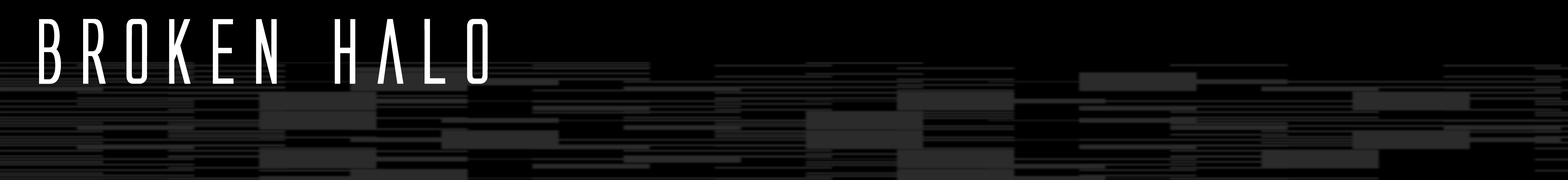
<style>
.page{position:relative;width:1568px;height:180px;background:#000000}
.page>*{position:absolute;margin:0}
.t1{font:83.4px "AlienLeague";letter-spacing:0.035em;color:#ffffff;font-weight:bold}
</style>
<div class="page">
<p class="t1" style="left:39px;top:18px;width:449px;height:66px">broken halo</p>
</div>
